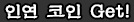
<style>
.page{position:relative;width:134px;height:22px;background:#333333}
.page>*{position:absolute;margin:0}
.t1{font:20px "KoreanYS-B";color:#ffffff;font-weight:bold}
</style>
<div class="page">
<p class="t1" style="left:5px;top:4px;width:124px;height:15px">인연 코인 Get!</p>
</div>
